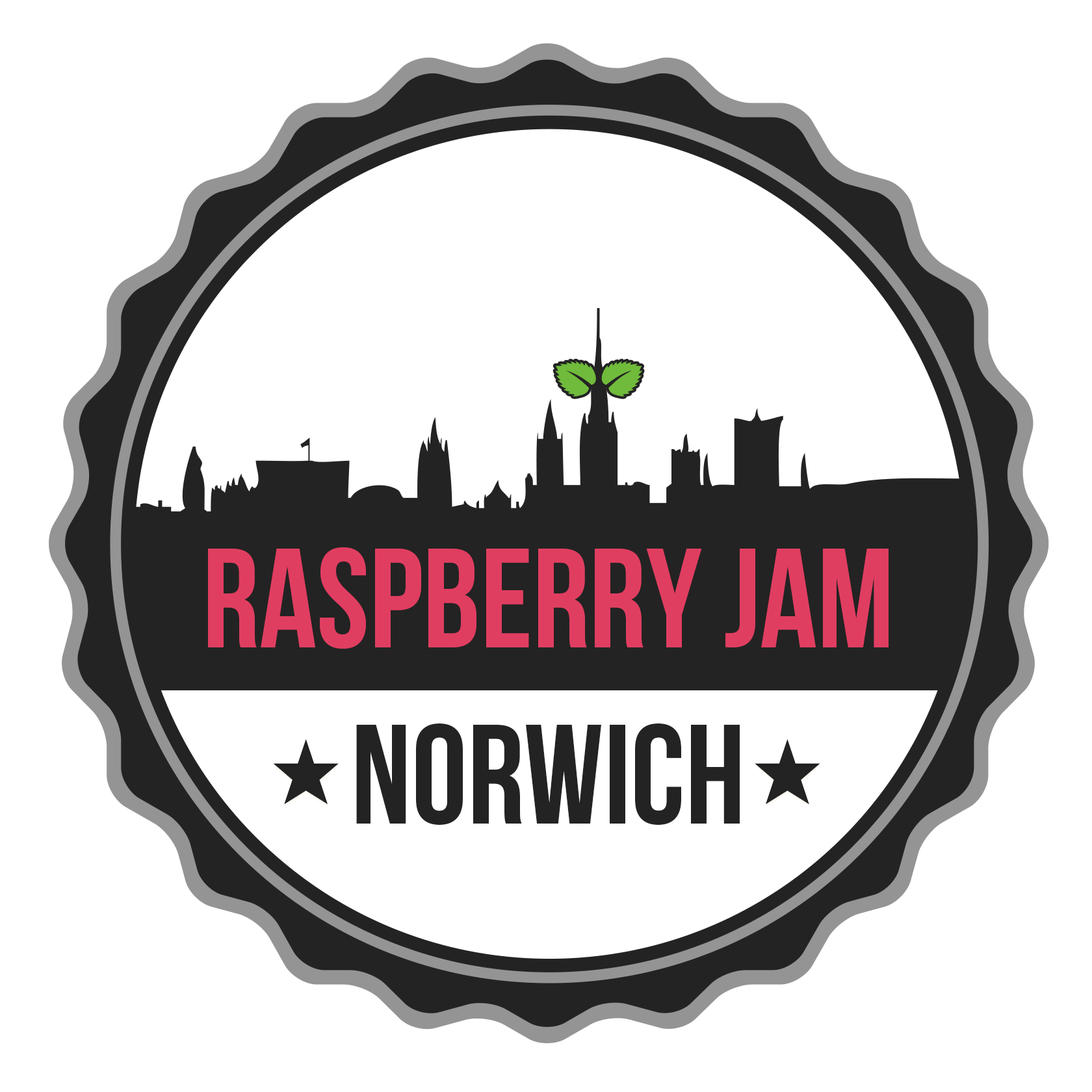
<style>
.page{position:relative;width:1092px;height:1092px;background:#ffffff}
.page>*{position:absolute;margin:0}
.t1{font:141.4px "BebasNeue";color:#e03e61}
.t2{font:141.4px "BebasNeue";color:#232323}
</style>
<div class="page">
<p class="t1" style="left:208px;top:547px;width:681px;height:102px">RASPBERRY JAM</p>
<p class="t2" style="left:356px;top:723px;width:384px;height:102px">NORWICH</p>
</div>
